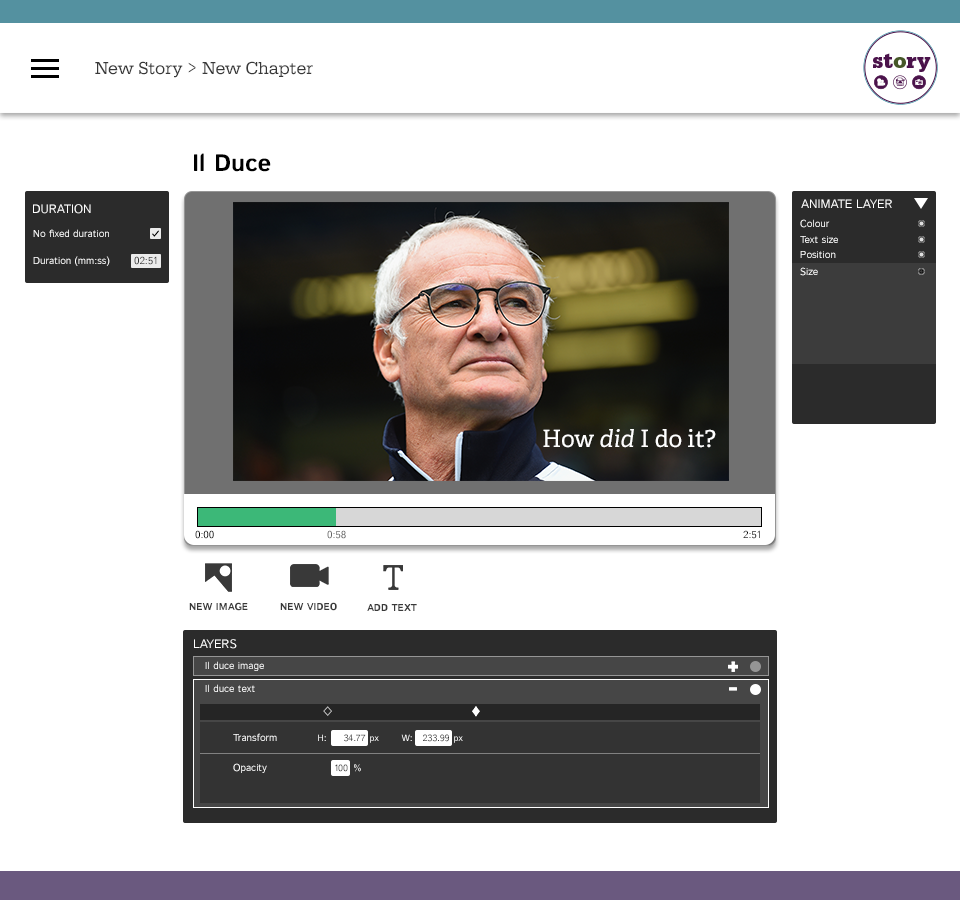
<style>
.page{position:relative;width:960px;height:900px;background:#ffffff}
.page>*{position:absolute;margin:0}
.t1{font:18px "Serifa-Reg";color:#393939}
.t2{font:18px "Factoria-Book";color:#393939}
.t3{font:24px "IstokWeb-Bold";color:#000000}
.t4{font:12px "IstokWeb-Regular";color:#ffffff;text-transform:uppercase}
.t5{font:10px "IstokWeb-Regular"}
.t6{font:10px "IstokWeb-Regular";color:#ffffff}
.t7{font:10px "IstokWeb-Regular";color:#323232}
.t8{font:24px "AdellePE";color:#ffffff}
.t9{font:24px "AdellePE-Italic";color:#ffffff}
.t10{font:10px "IstokWeb-Regular";color:#000000;text-transform:uppercase}
.t11{font:10px "IstokWeb-Regular";color:#666666;text-transform:uppercase}
.t12{font:10px "IstokWeb-Bold";color:#393939;text-transform:uppercase}
.t13{font:9px "IstokWeb-Regular";color:#ffffff}
.t14{font:9px "IstokWeb-Regular"}
.t15{font:9px "IstokWeb-Regular";color:#333333}
</style>
<div class="page">
<p class="t1" style="left:95px;top:61px;width:218px;height:17px">New Story<span class="t2"> &gt; </span>New Chapter</p>
<p class="t3" style="left:194px;top:153px;width:77px;height:19px">Il Duce</p>
<p class="t4" style="left:33px;top:204px;width:58px;height:10px">Duration</p>
<p class="t4" style="left:801px;top:199px;width:91px;height:9px">Animate layer</p>
<p class="t5" style="left:800px;top:219px;width:30px;height:9px">Colour</p>
<p class="t6" style="left:33px;top:229px;width:76px;height:8px">No fixed duration</p>
<p class="t6" style="left:800px;top:236px;width:38px;height:7px">Text size</p>
<p class="t6" style="left:33px;top:256px;width:77px;height:10px">Duration (mm:ss)</p>
<p class="t7" style="left:134px;top:256px;width:23px;height:9px">02:51</p>
<p class="t5" style="left:800px;top:251px;width:36px;height:7px">Position</p>
<p class="t6" style="left:800px;top:267px;width:18px;height:9px">Size</p>
<p class="t8" style="left:543px;top:429px;width:173px;height:19px">How <span class="t9">did </span>I do it?</p>
<p class="t10" style="left:195px;top:530px;width:19px;height:9px">0:00</p>
<p class="t11" style="left:327px;top:530px;width:19px;height:9px">0:58</p>
<p class="t10" style="left:743px;top:530px;width:17px;height:9px">2:51</p>
<p class="t12" style="left:189px;top:602px;width:59px;height:9px">New image</p>
<p class="t12" style="left:280px;top:602px;width:57px;height:9px">New video</p>
<p class="t12" style="left:367px;top:604px;width:50px;height:7px">Add text</p>
<p class="t4" style="left:194px;top:639px;width:43px;height:10px">layers</p>
<p class="t6" style="left:205px;top:661px;width:59px;height:10px">Il duce image</p>
<p class="t6" style="left:205px;top:684px;width:50px;height:8px">Il duce text</p>
<p class="t5" style="left:233px;top:733px;width:44px;height:8px">Transform</p>
<p class="t13" style="left:318px;top:734px;width:8px;height:7px">H:</p>
<p class="t14" style="left:344px;top:734px;width:22px;height:8px">34.77</p>
<p class="t13" style="left:370px;top:736px;width:9px;height:7px">px</p>
<p class="t13" style="left:401px;top:734px;width:11px;height:7px">W:</p>
<p class="t15" style="left:423px;top:734px;width:26px;height:8px">233.99</p>
<p class="t13" style="left:454px;top:736px;width:9px;height:7px">px</p>
<p class="t6" style="left:233px;top:763px;width:34px;height:10px">Opacity</p>
<p class="t14" style="left:335px;top:764px;width:13px;height:8px">100</p>
<p class="t14" style="left:354px;top:764px;width:7px;height:8px">%</p>
</div>
